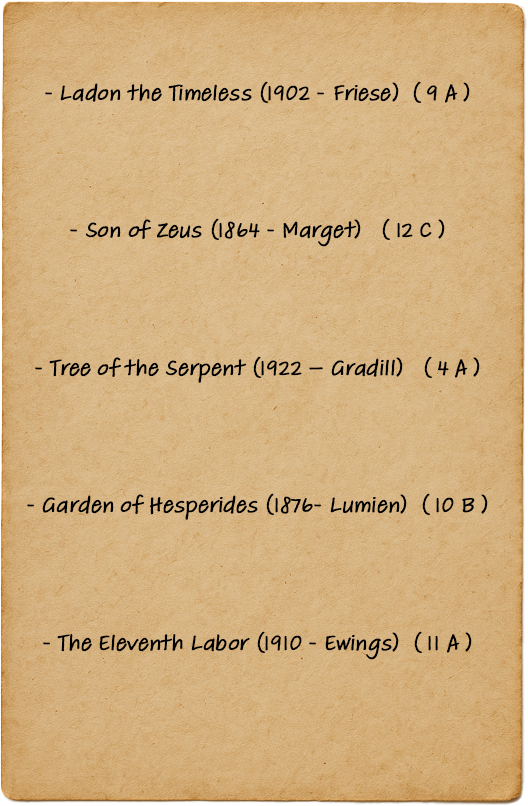
<style>
.page{position:relative;width:528px;height:806px}
.page>*{position:absolute;margin:0}
.t1{font:22.9px "AdobeHandwriting-Tiffany";color:#000000;font-weight:bold}
</style>
<div class="page">
<p class="t1" style="left:27px;top:81px;width:461px;height:579px">- Ladon the Timeless (1902 - Friese)  ( 9 A )<br><br><br><br><br>- Son of Zeus (1864 - Marget)   ( 12 C )<br><br><br><br><br>- Tree of the Serpent (1922 – Gradill)   ( 4 A )<br><br><br><br><br>- Garden of Hesperides (1876- Lumien)  ( 10 B )<br><br><br><br><br>- The Eleventh Labor (1910 - Ewings)  ( 11 A )</p>
</div>
